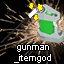
<style>
.page{position:relative;width:64px;height:64px}
.page>*{position:absolute;margin:0}
.t1{font:9px "ArialMT";color:#ffffff}
</style>
<div class="page">
<p class="t1" style="left:14px;top:45px;width:37px;height:18px;text-align:center">gunman<br>_itemgod</p>
</div>
